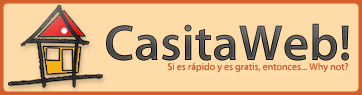
<style>
.page{position:relative;width:362px;height:95px;background:#ffdba8}
.page>*{position:absolute;margin:0}
.t1{font:51px "MyriadPro-Semibold"}
.t2{font:10px "MyriadPro-Regular";color:#d35f2c}
</style>
<div class="page">
<p class="t1" style="left:106px;top:23px;width:243px;height:38px">CasitaWeb!</p>
<p class="t2" style="left:167px;top:62px;width:182px;height:11px">Si es rápido y es gratis, entonces... Why not?</p>
</div>
